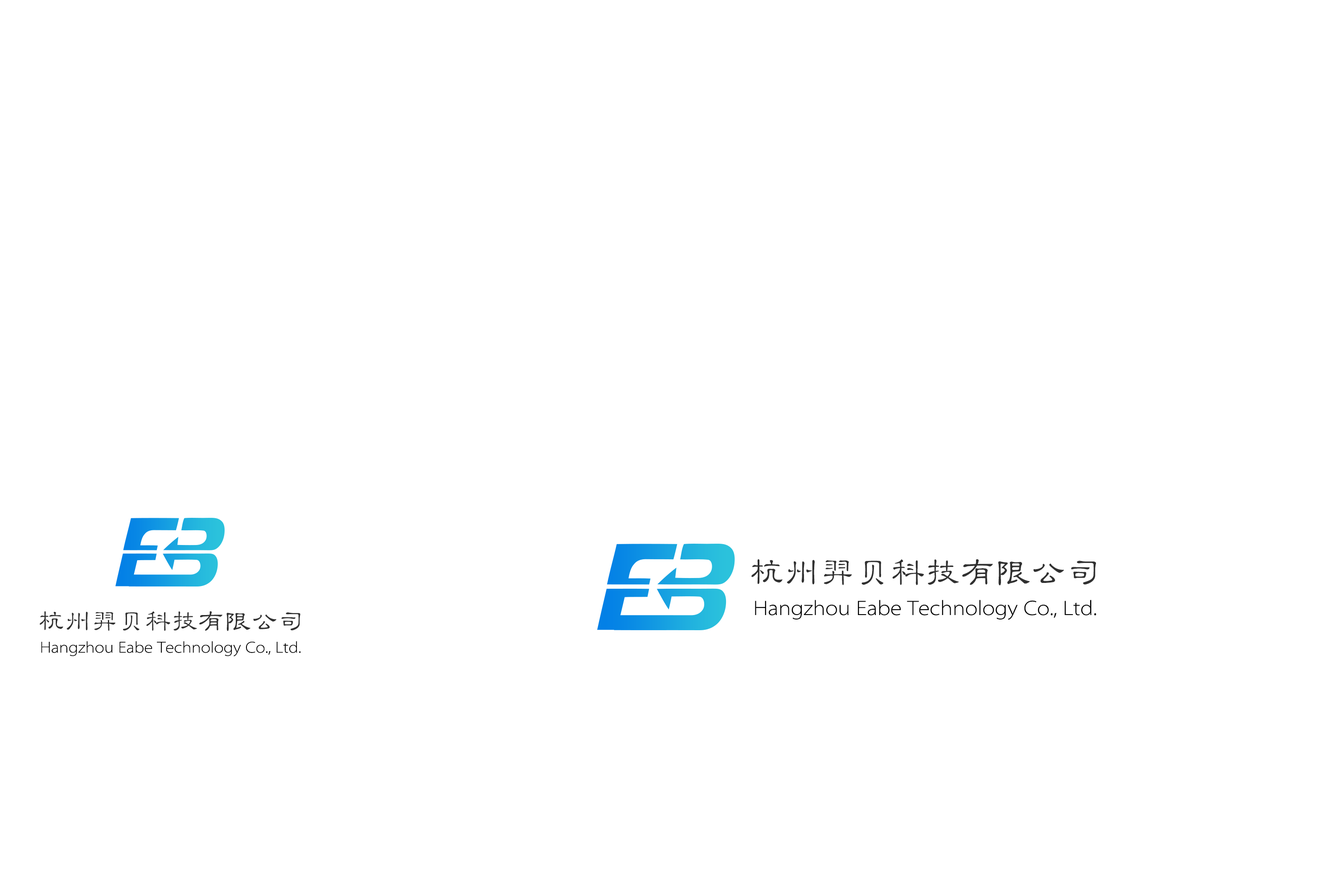
<style>
.page{position:relative;width:1337px;height:892px;background:#ffffff}
.page>*{position:absolute;margin:0}
.t1{font:34.5px "FZLBJW--GB1-0";letter-spacing:0.02em;color:#303030}
.t2{font:20.9px "ZHSRXT--GBK1-0";color:#000000}
.t3{font:26.1px "FZLBJW--GB1-0";letter-spacing:0.02em;color:#303030}
.t4{font:15.9px "ZHSRXT--GBK1-0";color:#000000}
</style>
<div class="page">
<p class="t1" style="left:752px;top:559px;width:345px;height:26px">杭州羿贝科技有限公司</p>
<p class="t2" style="left:755px;top:600px;width:342px;height:20px">Hangzhou Eabe Technology Co., Ltd.</p>
<p class="t3" style="left:40px;top:611px;width:260px;height:20px">杭州羿贝科技有限公司</p>
<p class="t4" style="left:41px;top:641px;width:260px;height:15px">Hangzhou Eabe Technology Co., Ltd.</p>
</div>
